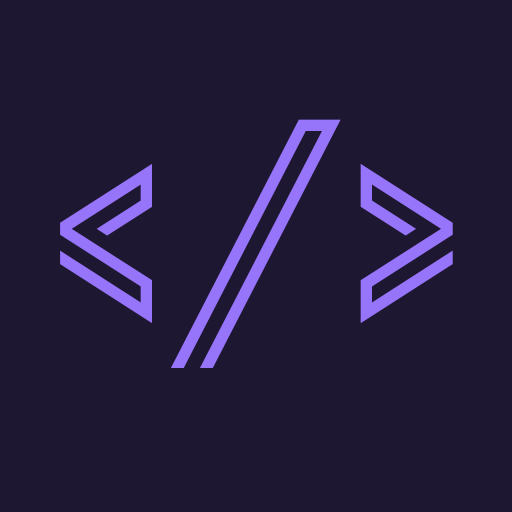
<style>
.page{position:relative;width:512px;height:512px;background:#1e1732}
.page>*{position:absolute;margin:0}
.t1{font:265.3px "LIBRARY3AM";color:#9775fa}
</style>
<div class="page">
<p class="t1" style="left:60px;top:119px;width:393px;height:249px">&lt;/&gt;</p>
</div>
